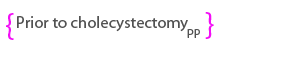
<style>
.page{position:relative;width:300px;height:60px;background:#ffffff}
.page>*{position:absolute;margin:0}
.t1{font:33.3px "MyriadPro-Regular";color:#f30df6}
.t2{font:16.7px "MyriadPro-Regular";color:#525252}
.t3{font:12.5px "MyriadPro-Regular";color:#525252}
</style>
<div class="page">
<p class="t1" style="left:6px;top:13px;width:8px;height:27px">{</p>
<p class="t2" style="left:17px;top:16px;width:171px;height:16px">Prior to cholecystectomy</p>
<p class="t1" style="left:205px;top:12px;width:9px;height:27px">}</p>
<p class="t3" style="left:187px;top:29px;width:13px;height:9px">PP</p>
</div>
